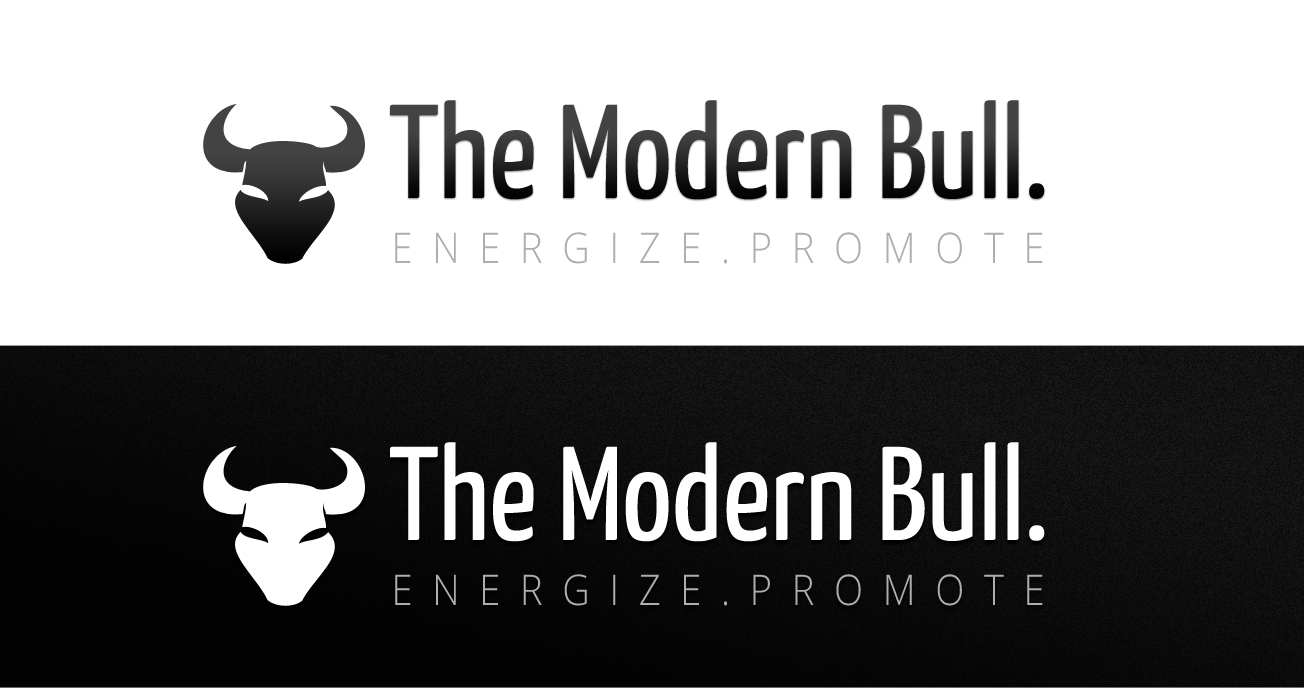
<style>
.page{position:relative;width:1304px;height:688px;background:#ffffff}
.page>*{position:absolute;margin:0}
.t1{font:132.6px "YanoneKaffeesatz-Regular"}
.t2{font:42.2px "OpenSans-Light";letter-spacing:0.52em;color:#aeaeae;text-transform:uppercase;scale:0.9 1}
</style>
<div class="page">
<p class="t1" style="left:390px;top:100px;width:655px;height:100px">The Modern Bull.</p>
<p class="t2" style="left:395px;top:232px;width:648px;height:32px">ENERGIze.PROMOTE</p>
</div>
